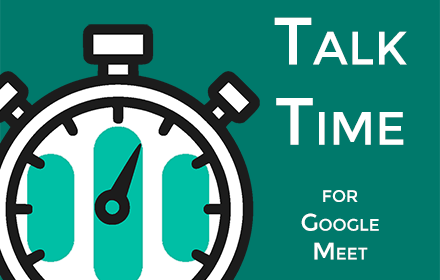
<style>
.page{position:relative;width:440px;height:280px;background:#00796b}
.page>*{position:absolute;margin:0}
.t1{font:23.9px "Montserrat-Regular";color:#ffffff;font-variant:small-caps}
.t2{font:66.9px "Montserrat-Regular";color:#ffffff;font-variant:small-caps}
</style>
<div class="page">
<p class="t1" style="left:274px;top:17px;width:133px;height:243px;text-align:center"><span class="t2">Talk<br>Time<br></span><br>for<br>Google<br>Meet</p>
</div>
